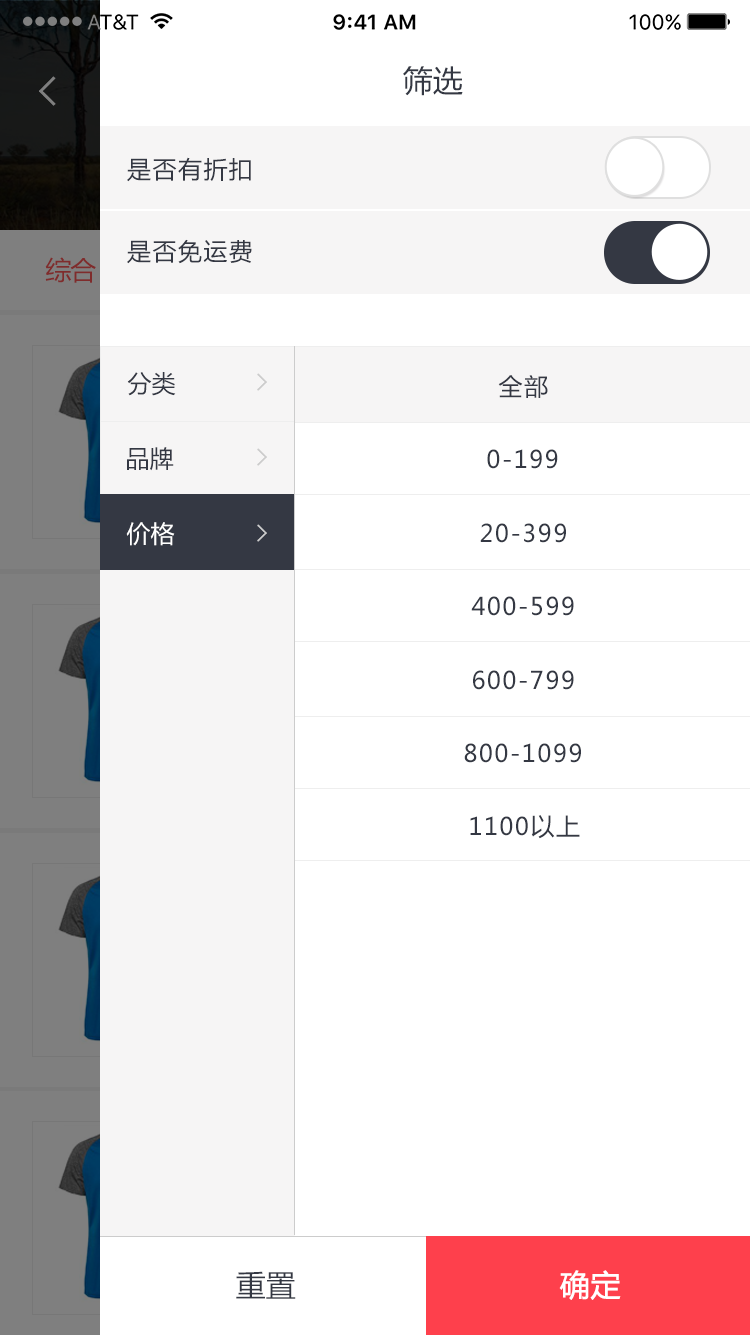
<style>
.page{position:relative;width:750px;height:1335px;background:#ffffff}
.page>*{position:absolute;margin:0}
.t1{font:30px "MicrosoftYaHei";color:#343843}
.t2{font:24px "MicrosoftYaHei";letter-spacing:0.06em;color:#343843}
.t3{font:24px "MicrosoftYaHei";color:#343843}
.t4{font:24px "MicrosoftYaHei";color:#ffffff}
.t5{font:30px "MicrosoftYaHei";color:#ffffff;font-weight:bold}
</style>
<div class="page">
<p class="t1" style="left:403px;top:66px;width:60px;height:30px">筛选</p>
<p class="t2" style="left:127px;top:157px;width:124px;height:25px">是否有折扣</p>
<p class="t2" style="left:127px;top:239px;width:125px;height:25px">是否免运费</p>
<p class="t3" style="left:127px;top:372px;width:49px;height:24px">分类</p>
<p class="t2" style="left:498px;top:375px;width:50px;height:23px">全部</p>
<p class="t3" style="left:127px;top:447px;width:47px;height:24px">品牌</p>
<p class="t2" style="left:487px;top:449px;width:71px;height:20px">0-199</p>
<p class="t4" style="left:126px;top:522px;width:49px;height:24px">价格</p>
<p class="t2" style="left:480px;top:523px;width:86px;height:20px">20-399</p>
<p class="t2" style="left:471px;top:596px;width:103px;height:20px">400-599</p>
<p class="t2" style="left:473px;top:670px;width:101px;height:20px">600-799</p>
<p class="t2" style="left:464px;top:743px;width:117px;height:20px">800-1099</p>
<p class="t2" style="left:470px;top:815px;width:110px;height:24px">1100以上</p>
<p class="t1" style="left:236px;top:1271px;width:60px;height:28px">重置</p>
<p class="t5" style="left:559px;top:1270px;width:62px;height:30px">确定</p>
</div>
